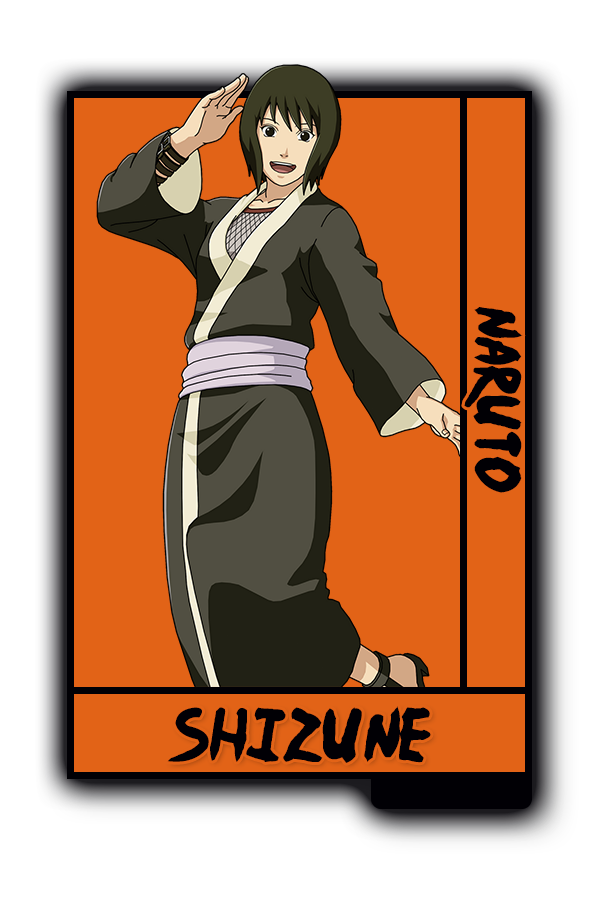
<style>
.page{position:relative;width:600px;height:900px;background:#e26317}
.page>*{position:absolute;margin:0}
.t1{font:52px "Ninja-Naruto";color:#010005}
.t2{font:60.3px "Ninja-Naruto";color:#010005}
</style>
<div class="page">
<p class="t1" style="left:464px;top:307px;width:59px;height:186px;rotate:90deg">Naruto</p>
<p class="t2" style="left:167px;top:706px;width:264px;height:57px">Shizune</p>
</div>
